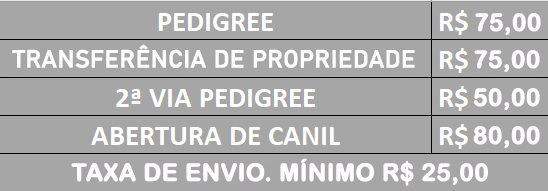
<style>
.page{position:relative;width:548px;height:191px;background:#a6a6a6}
.page>*{position:absolute;margin:0}
.t1{font:24px "ArialRoundedMTBold";color:#fffcff;text-transform:uppercase;font-weight:bold}
.t2{font:24px "Bahnschrift";color:#fefdfd;text-transform:uppercase;font-weight:bold}
</style>
<div class="page">
<p class="t1" style="left:475px;top:13px;width:66px;height:22px">75,00</p>
<p class="t2" style="left:12px;top:44px;width:403px;height:24px">transferência de propriedade</p>
<p class="t1" style="left:474px;top:50px;width:66px;height:22px">75,00</p>
<p class="t1" style="left:474px;top:88px;width:66px;height:22px">50,00</p>
<p class="t1" style="left:473px;top:126px;width:67px;height:22px">80,00</p>
<p class="t1" style="left:71px;top:158px;width:417px;height:28px">taxa de envio. mínimo r$ 25,00</p>
</div>
